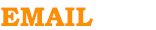
<style>
.page{position:relative;width:156px;height:30px;background:#ffffff}
.page>*{position:absolute;margin:0}
.t1{font:27px "BookmanOldStyle-Bold";color:#fb8e01;font-variant:small-caps}
</style>
<div class="page">
<p class="t1" style="left:1px;top:7px;width:92px;height:19px">EMAIL</p>
</div>
